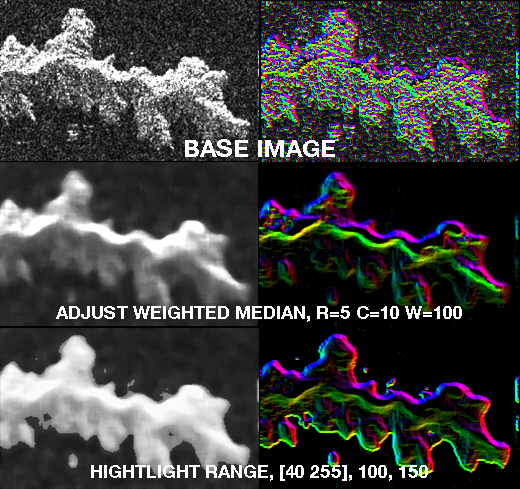
<style>
.page{position:relative;width:520px;height:489px;background:#000000}
.page>*{position:absolute;margin:0}
.t1{font:24px "HelveticaNeue-Bold";color:#ffffff}
.t2{font:18px "HelveticaNeue-Bold";color:#ffffff}
</style>
<div class="page">
<p class="t1" style="left:185px;top:139px;width:150px;height:18px">BASE IMAGE</p>
<p class="t2" style="left:56px;top:306px;width:406px;height:16px">ADJUST WEIGHTED MEDIAN, R=5 C=10 W=100</p>
<p class="t2" style="left:91px;top:465px;width:337px;height:16px">HIGHTLIGHT RANGE, [40 255], 100, 150</p>
</div>
